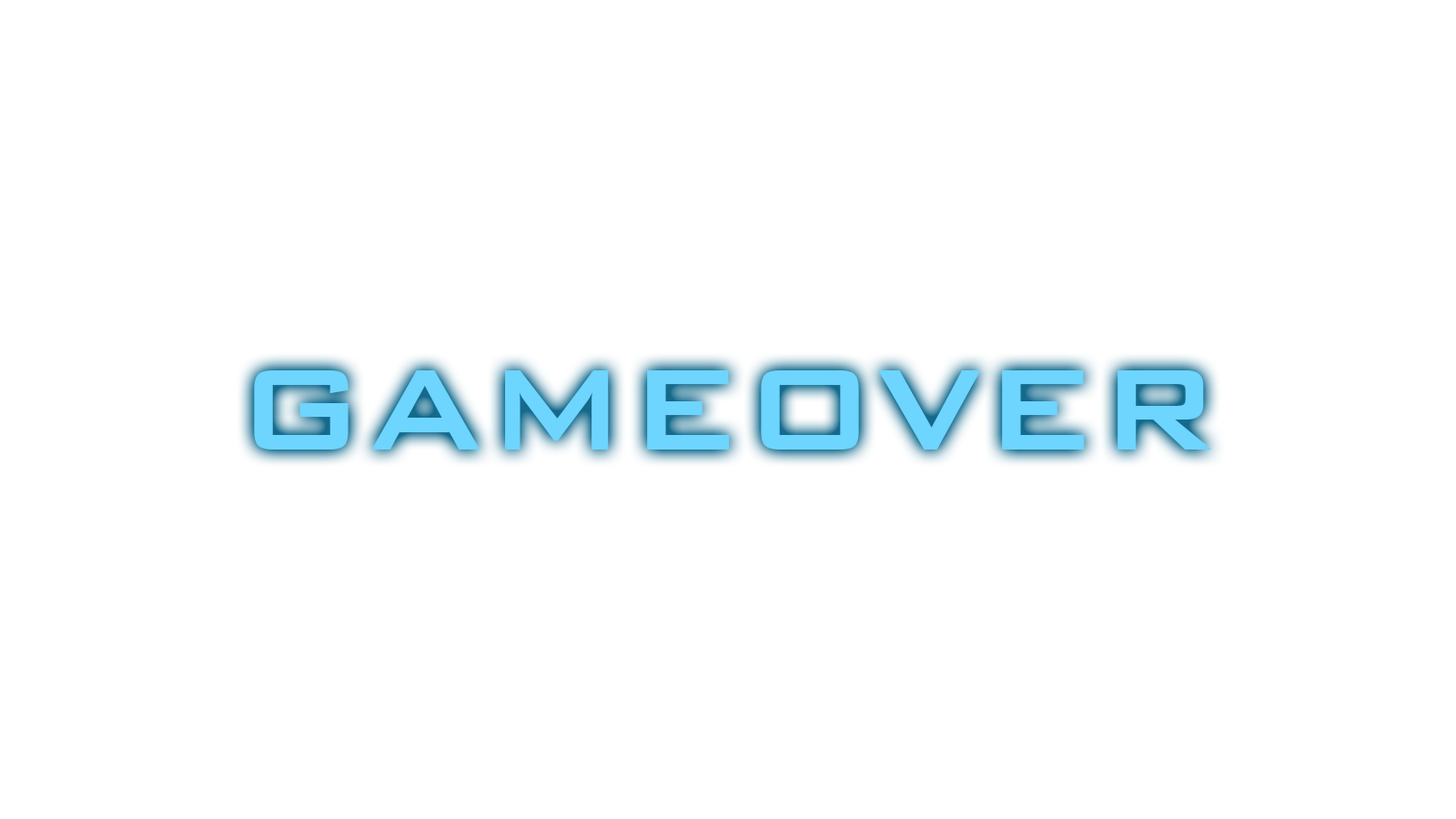
<style>
.page{position:relative;width:1456px;height:819px;background:#ffffff}
.page>*{position:absolute;margin:0}
.t1{font:153.4px "BankGothicBT-Medium";color:#6dd5fe}
</style>
<div class="page">
<p class="t1" style="left:254px;top:370px;width:958px;height:80px">GAMEOVER</p>
</div>
